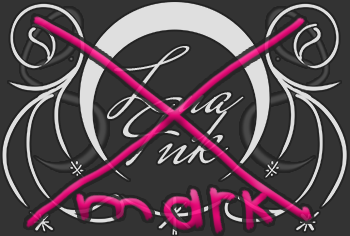
<style>
.page{position:relative;width:350px;height:236px;background:#333333}
.page>*{position:absolute;margin:0}
.t1{font:89px "MrsSaintDelafield-Regular";color:#dfdfdf}
.t2{font:89px/51.2px "MrsSaintDelafield-Regular";color:#dfdfdf}
</style>
<div class="page">
<p class="t1" style="left:107px;top:46px;width:137px;height:120px;text-align:center">Lua<br><span class="t2">Ink</span></p>
</div>
